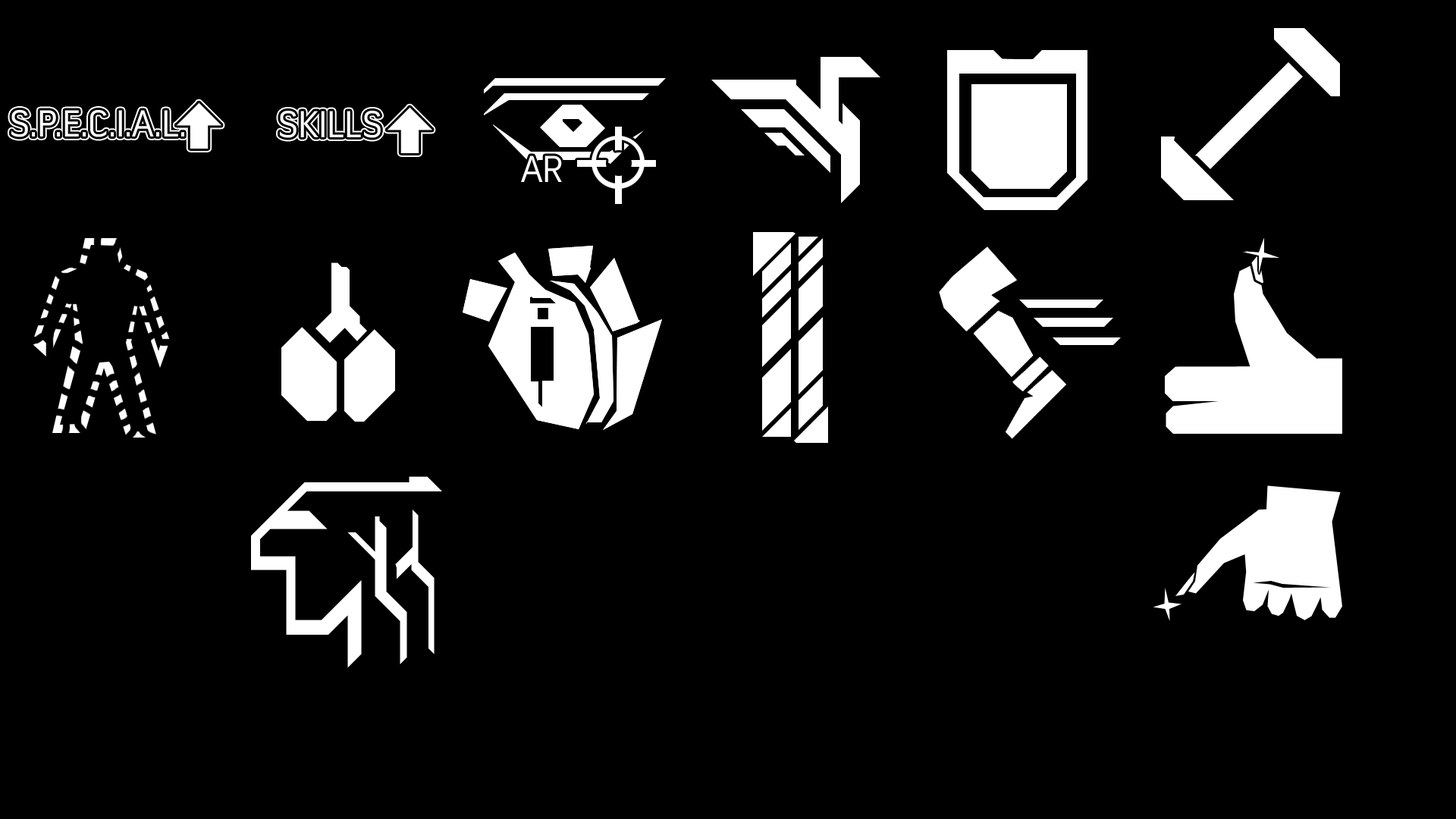
<style>
.page{position:relative;width:1456px;height:819px;background:#000000}
.page>*{position:absolute;margin:0}
.t1{font:37.9px "ConvectionRegular";color:#ffffff}
</style>
<div class="page">
<p class="t1" style="left:11px;top:110px;width:173px;height:27px">S.P.E.C.I.A.L.</p>
<p class="t1" style="left:11px;top:110px;width:173px;height:27px">S.P.E.C.I.A.L.</p>
<p class="t1" style="left:280px;top:111px;width:101px;height:27px">SKILLS</p>
<p class="t1" style="left:280px;top:111px;width:101px;height:27px">SKILLS</p>
<p class="t1" style="left:521px;top:155px;width:41px;height:27px">AR</p>
</div>
